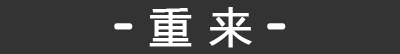
<style>
.page{position:relative;width:400px;height:54px;background:#333333}
.page>*{position:absolute;margin:0}
.t1{font:42px "MicrosoftYaHei";letter-spacing:0.4em;color:#ffffff;font-weight:bold}
</style>
<div class="page">
<p class="t1" style="left:149px;top:7px;width:103px;height:41px">重来</p>
</div>
